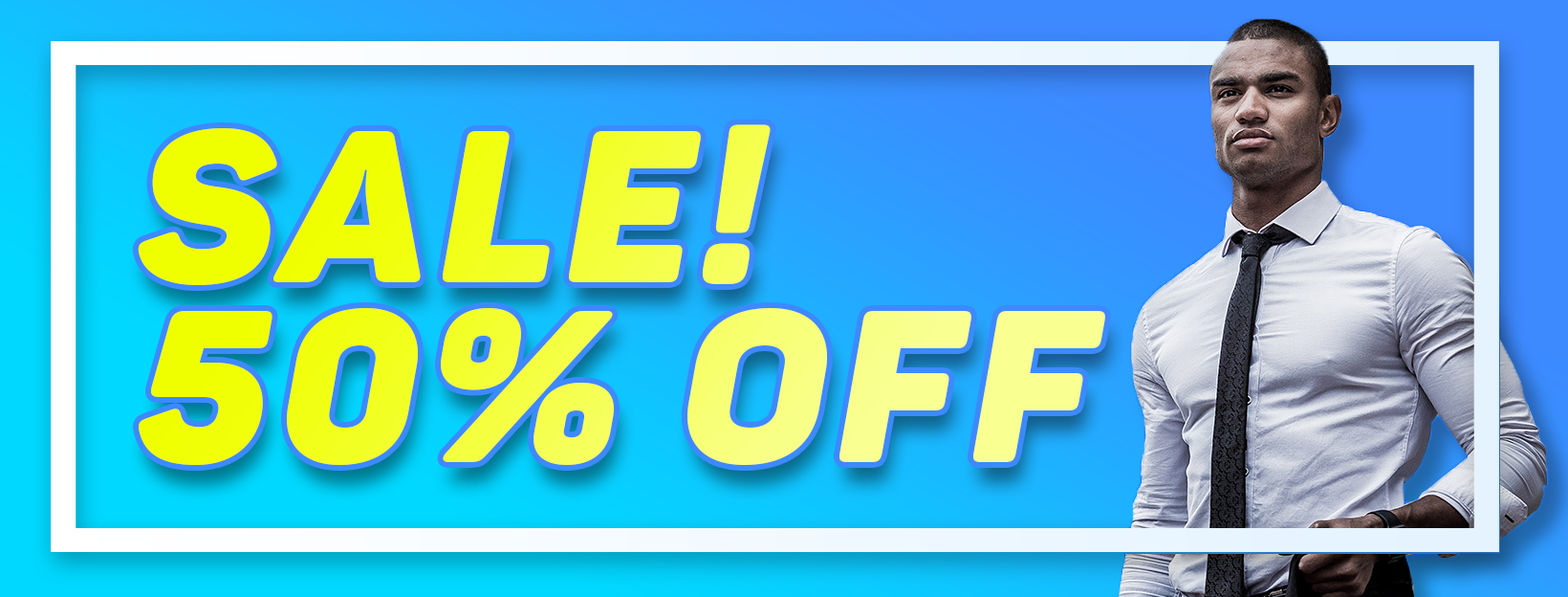
<style>
.page{position:relative;width:1568px;height:597px}
.page>*{position:absolute;margin:0}
.t1{font:213.2px/179.7px "Panton-BlackitalicCaps";letter-spacing:0.05em}
</style>
<div class="page">
<p class="t1" style="left:138px;top:124px;width:967px;height:341px">sale! <br>50% Off</p>
</div>
